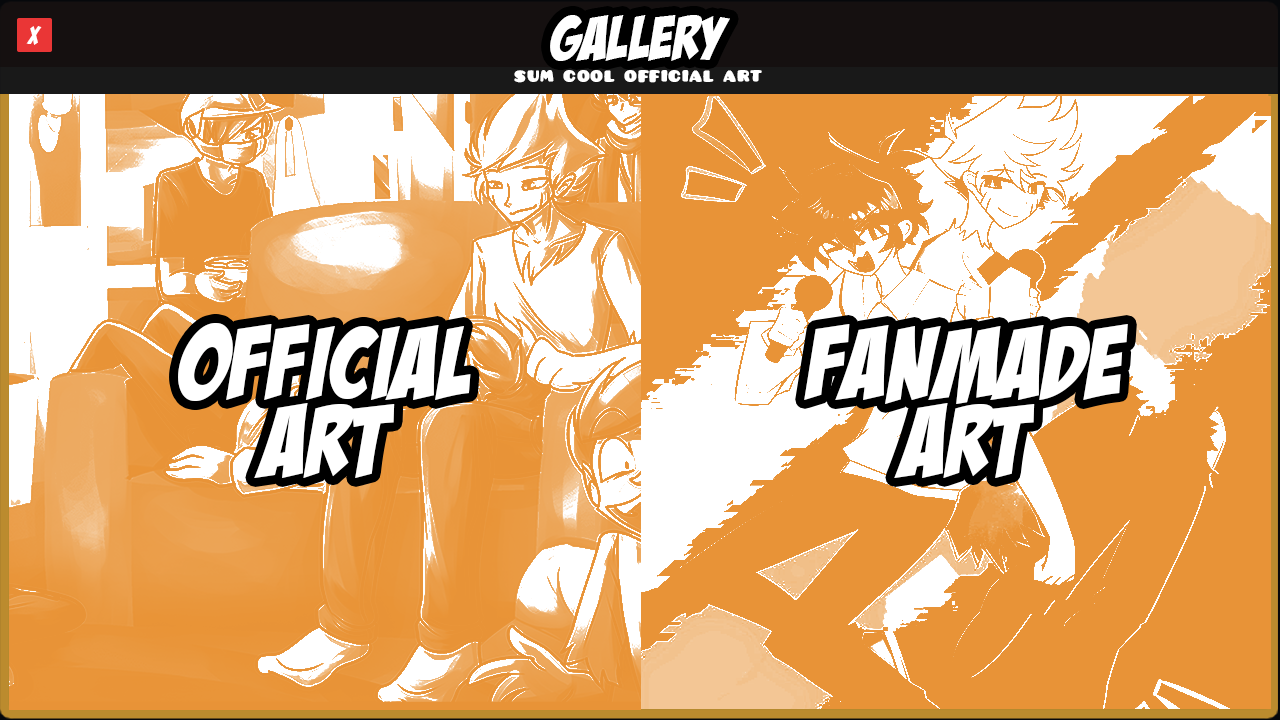
<style>
.page{position:relative;width:1280px;height:720px;background:#e89337}
.page>*{position:absolute;margin:0}
.t1{font:61.1px "BadaBoomBB";letter-spacing:0.02em;color:#ffffff}
.t2{font:25px "BadaBoomBB";letter-spacing:0.02em;color:#ffffff}
.t3{font:17.7px "Pusab";letter-spacing:0.04em;color:#ffffff;text-transform:uppercase}
.t4{font:100px/77.8px "BadaBoomBB";letter-spacing:0.02em;color:#ffffff}
</style>
<div class="page">
<p class="t1" style="left:550px;top:15px;width:180px;height:46px">gallery</p>
<p class="t2" style="left:26px;top:26px;width:16px;height:19px">x</p>
<p class="t3" style="left:514px;top:70px;width:248px;height:13px">sum cool official art</p>
<p class="t4" style="left:178px;top:323px;width:293px;height:155px;text-align:center">official<br>art</p>
<p class="t4" style="left:804px;top:324px;width:324px;height:154px;text-align:center">Fanmade<br>art</p>
</div>
